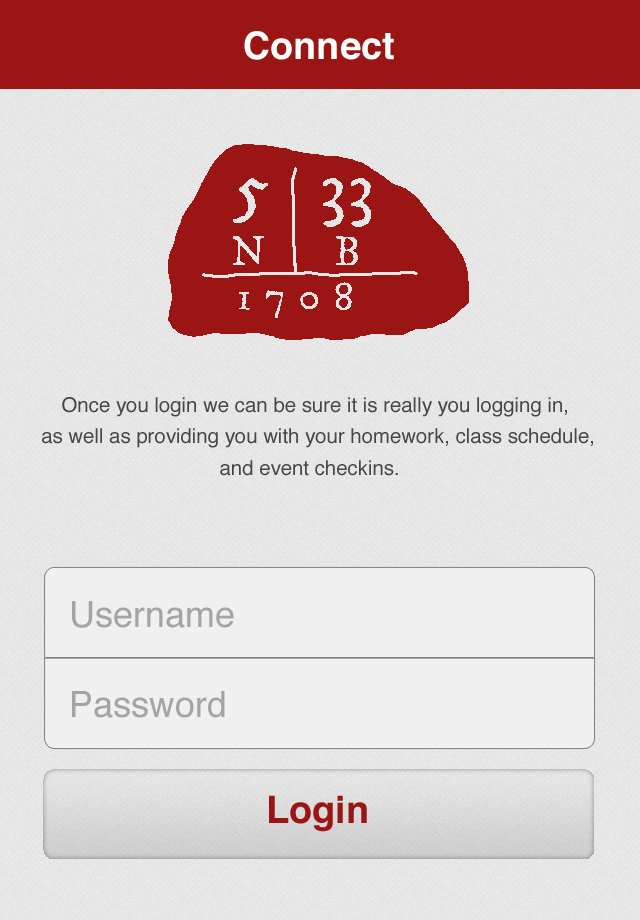
<style>
.page{position:relative;width:640px;height:920px}
.page>*{position:absolute;margin:0}
.t1{font:37.9px "Helvetica-Bold";color:#ffffff}
.t2{font:20.4px/31.7px "Helvetica";color:#464646}
.t3{font:37.9px "Helvetica-Bold";color:#9b1515}
</style>
<div class="page">
<p class="t1" style="left:244px;top:31px;width:150px;height:29px">Connect</p>
<p class="t2" style="left:42px;top:397px;width:551px;height:79px;text-align:center">Once you login we can be sure it is really you logging in, <br>as well as providing you with your homework, class schedule,<br>and event checkins.</p>
<p class="t3" style="left:269px;top:795px;width:98px;height:37px">Login</p>
</div>
